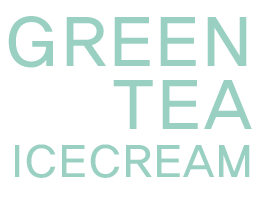
<style>
.page{position:relative;width:258px;height:204px;background:#ffffff}
.page>*{position:absolute;margin:0}
.t1{font:72px/63px "HaanYGodic23";letter-spacing:-0.02em;color:#9ad0c2}
.t2{font:47px/48px "HaanYGodic23";letter-spacing:-0.04em;color:#9ad0c2}
</style>
<div class="page">
<p class="t1" style="left:8px;top:16px;width:244px;height:162px;text-align:right">GREEN<br>TEA<br><span class="t2">ICECREAM</span></p>
</div>
